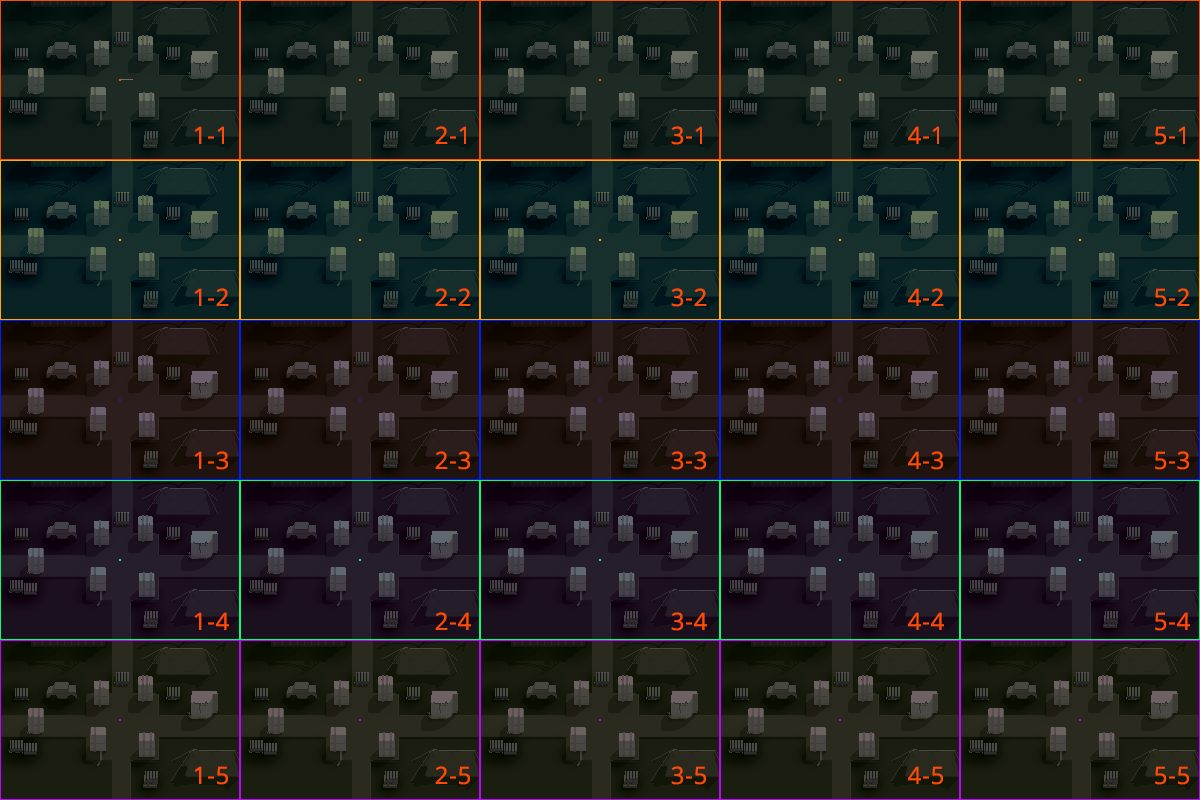
<style>
.page{position:relative;width:1200px;height:800px}
.page>*{position:absolute;margin:0}
.t1{font:24px "OpenSans";letter-spacing:0.03em;color:#ff4b03}
</style>
<div class="page">
<p class="t1" style="left:194px;top:126px;width:30px;height:18px">1-1</p>
<p class="t1" style="left:435px;top:126px;width:31px;height:18px">2-1</p>
<p class="t1" style="left:671px;top:126px;width:31px;height:19px">3-1</p>
<p class="t1" style="left:908px;top:126px;width:31px;height:18px">4-1</p>
<p class="t1" style="left:1155px;top:126px;width:30px;height:19px">5-1</p>
<p class="t1" style="left:194px;top:288px;width:35px;height:18px">1-2</p>
<p class="t1" style="left:435px;top:288px;width:36px;height:18px">2-2</p>
<p class="t1" style="left:671px;top:288px;width:36px;height:19px">3-2</p>
<p class="t1" style="left:908px;top:288px;width:36px;height:18px">4-2</p>
<p class="t1" style="left:1155px;top:288px;width:35px;height:19px">5-2</p>
<p class="t1" style="left:194px;top:451px;width:34px;height:19px">1-3</p>
<p class="t1" style="left:435px;top:451px;width:35px;height:19px">2-3</p>
<p class="t1" style="left:671px;top:451px;width:35px;height:19px">3-3</p>
<p class="t1" style="left:908px;top:451px;width:35px;height:19px">4-3</p>
<p class="t1" style="left:1155px;top:451px;width:34px;height:19px">5-3</p>
<p class="t1" style="left:194px;top:612px;width:35px;height:18px">1-4</p>
<p class="t1" style="left:435px;top:612px;width:36px;height:18px">2-4</p>
<p class="t1" style="left:671px;top:612px;width:36px;height:19px">3-4</p>
<p class="t1" style="left:908px;top:612px;width:36px;height:18px">4-4</p>
<p class="t1" style="left:1155px;top:612px;width:35px;height:19px">5-4</p>
<p class="t1" style="left:194px;top:766px;width:34px;height:19px">1-5</p>
<p class="t1" style="left:435px;top:766px;width:35px;height:19px">2-5</p>
<p class="t1" style="left:671px;top:766px;width:35px;height:19px">3-5</p>
<p class="t1" style="left:908px;top:766px;width:35px;height:19px">4-5</p>
<p class="t1" style="left:1155px;top:766px;width:34px;height:19px">5-5</p>
</div>
